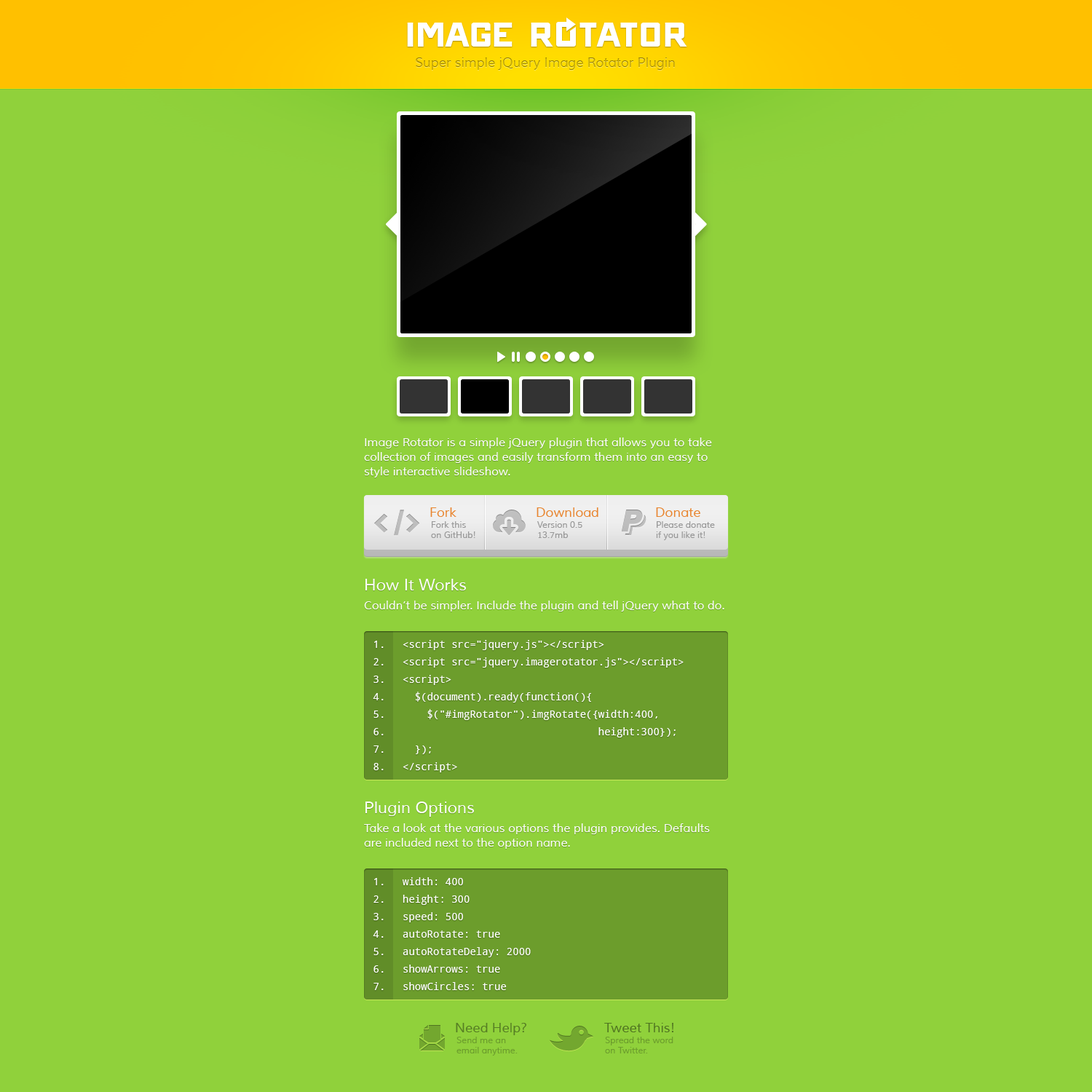
<style>
.page{position:relative;width:1092px;height:1092px;background:#90d13b}
.page>*{position:absolute;margin:0}
.t1{font:54.6px "ONRAMP";color:#ffffff;text-transform:uppercase}
.t2{font:13.1px "Muli"}
.t3{font:11.6px/14.6px "Muli";color:#ffffff}
.t4{font:13.1px "Muli";color:#e8852f}
.t5{font:8.7px/10.2px "Muli";color:#989898}
.t6{font:16px/16px "Muli";color:#ffffff}
.t7{font:11.6px/18.9px "Muli";color:#ffffff}
.t8{font:10.2px/17.5px "DroidSansMono";color:#ffffff}
.t9{font:13.1px "Muli";color:#507521}
.t10{font:8.7px/10.2px "Muli";color:#6d9f2d}
</style>
<div class="page">
<p class="t1" style="left:407px;top:23px;width:280px;height:24px">Image R  tator</p>
<p class="t2" style="left:416px;top:58px;width:259px;height:12px">Super simple jQuery Image Rotator Plugin</p>
<p class="t3" style="left:364px;top:438px;width:348px;height:40px">Image Rotator is a simple jQuery plugin that allows you to take collection of images and easily transform them into an easy to style interactive slideshow.</p>
<p class="t4" style="left:430px;top:507px;width:26px;height:10px">Fork</p>
<p class="t4" style="left:537px;top:507px;width:61px;height:10px">Download</p>
<p class="t4" style="left:656px;top:507px;width:44px;height:10px">Donate</p>
<p class="t5" style="left:431px;top:521px;width:44px;height:17px">Fork this<br>on GitHub!</p>
<p class="t5" style="left:537px;top:521px;width:45px;height:17px">Version 0.5<br>13.7mb</p>
<p class="t5" style="left:656px;top:521px;width:59px;height:19px">Please donate <br>if you like it!</p>
<p class="t3" style="left:364px;top:579px;width:360px;height:33px"><span class="t6">How It Works<br></span><span class="t7">Couldn’t be simpler. Include the </span>plugin and tell jQuery what to do.</p>
<p class="t8" style="left:373px;top:641px;width:11px;height:129px;text-align:center">1.<br>2.<br>3.<br>4.<br>5.<br>6.<br>7.<br>8.</p>
<p class="t8" style="left:403px;top:640px;width:281px;height:132px">&lt;script src="jquery.js"&gt;&lt;/script&gt;<br>&lt;script src="jquery.imagerotator.js"&gt;&lt;/script&gt;<br>&lt;script&gt;<br>  $(document).ready(function(){<br>    $("#imgRotator").imgRotate({width:400,<br>         height:300});<br>  });<br>&lt;/script&gt;</p>
<p class="t7" style="left:364px;top:802px;width:346px;height:47px"><span class="t6">Plugin Options<br></span>Take a look at the various options the plugin provides. Defaults <span class="t3">are included next to the option name.</span></p>
<p class="t8" style="left:373px;top:878px;width:11px;height:112px;text-align:center">1.<br>2.<br>3.<br>4.<br>5.<br>6.<br>7.</p>
<p class="t8" style="left:402px;top:877px;width:129px;height:113px">width: 400<br>height: 300<br>speed: 500<br>autoRotate: true<br>autoRotateDelay: 2000<br>showArrows: true<br>showCircles: true</p>
<p class="t9" style="left:456px;top:1023px;width:70px;height:12px;opacity:0.9">Need Help?</p>
<p class="t9" style="left:604px;top:1023px;width:69px;height:9px">Tweet This!</p>
<p class="t10" style="left:456px;top:1037px;width:62px;height:19px">Send me an<br>email anytime.</p>
<p class="t10" style="left:605px;top:1037px;width:68px;height:16px">Spread the word<br>on Twitter.</p>
</div>
